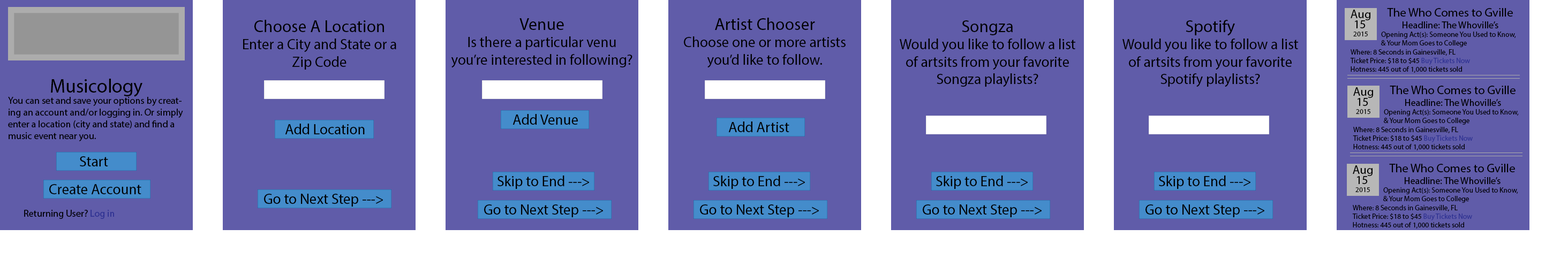
<style>
.page{position:relative;width:1568px;height:259px;background:#605ca9}
.page>*{position:absolute;margin:0}
.t1{font:14.5px "MyriadPro-Regular";color:#000000}
.t2{font:17px "MyriadPro-Regular";color:#000000}
.t3{font:12.1px "MyriadPro-Regular";color:#000000}
.t4{font:7.3px "MyriadPro-Regular";color:#000000}
.t5{font:9.7px "MyriadPro-Regular";color:#000000}
.t6{font:7.3px "MyriadPro-Regular";color:#2e3192}
.t7{font:19.4px "MyriadPro-Regular";color:#000000}
.t8{font:9.7px "MyriadPro-Regular";color:#2e3192}
</style>
<div class="page">
<p class="t1" style="left:684px;top:18px;width:162px;height:50px;text-align:center"><span class="t2">Artist Chooser<br></span>Choose one or more artists you’d like to follow.</p>
<p class="t3" style="left:1351px;top:10px;width:19px;height:10px">Aug</p>
<p class="t4" style="left:1381px;top:8px;width:135px;height:39px;text-align:center"><span class="t3">The Who Comes to Gville<br></span><span class="t5">Headline: The Whoville’s<br></span>Opening Act(s): Someone You Used to Know, &amp; Your Mom Goes to College</p>
<p class="t1" style="left:243px;top:20px;width:153px;height:50px;text-align:center"><span class="t2">Choose A Location<br></span>Enter a City and State or a Zip Code</p>
<p class="t1" style="left:451px;top:18px;width:181px;height:50px;text-align:center"><span class="t2">Venue<br></span>Is there a particular venu you’re interested in following?</p>
<p class="t1" style="left:900px;top:20px;width:175px;height:67px;text-align:center"><span class="t2">Songza<br></span>Would you like to follow a list of artsits from your favorite Songza playlists?</p>
<p class="t1" style="left:1122px;top:20px;width:176px;height:67px;text-align:center"><span class="t2">Spotify<br></span>Would you like to follow a list of artsits from your favorite Spotify playlists?</p>
<p class="t3" style="left:1355px;top:20px;width:11px;height:8px">15</p>
<p class="t4" style="left:1353px;top:32px;width:15px;height:4px">2015</p>
<p class="t4" style="left:1350px;top:49px;width:120px;height:24px">Where: 8 Seconds in Gainesville, FL<br>Ticket Price: $18 to $45 <span class="t6">Buy Tickets Now<br></span>Hotness: 445 out of 1,000 tickets sold</p>
<p class="t5" style="left:8px;top:79px;width:175px;height:62px;text-align:center"><span class="t7">Musicology<br></span>You can set and save your options by creating an account and/or logging in. Or simply enter a location (city and state) and find a music event near you.</p>
<p class="t3" style="left:1353px;top:87px;width:20px;height:11px">Aug</p>
<p class="t4" style="left:1384px;top:86px;width:135px;height:39px;text-align:center"><span class="t3">The Who Comes to Gville<br></span><span class="t5">Headline: The Whoville’s<br></span>Opening Act(s): Someone You Used to Know, &amp; Your Mom Goes to College</p>
<p class="t3" style="left:1358px;top:98px;width:10px;height:8px">15</p>
<p class="t4" style="left:1356px;top:109px;width:14px;height:5px">2015</p>
<p class="t1" style="left:285px;top:124px;width:80px;height:10px">Add Location</p>
<p class="t1" style="left:512px;top:114px;width:66px;height:11px">Add Venue</p>
<p class="t1" style="left:728px;top:122px;width:61px;height:10px">Add Artist</p>
<p class="t4" style="left:1353px;top:127px;width:120px;height:23px">Where: 8 Seconds in Gainesville, FL<br>Ticket Price: $18 to $45 <span class="t6">Buy Tickets Now<br></span>Hotness: 445 out of 1,000 tickets sold</p>
<p class="t1" style="left:80px;top:156px;width:28px;height:11px">Start</p>
<p class="t3" style="left:1353px;top:165px;width:20px;height:11px">Aug</p>
<p class="t4" style="left:1383px;top:164px;width:135px;height:39px;text-align:center"><span class="t3">The Who Comes to Gville<br></span><span class="t5">Headline: The Whoville’s<br></span>Opening Act(s): Someone You Used to Know, &amp; Your Mom Goes to College</p>
<p class="t1" style="left:49px;top:184px;width:92px;height:10px">Create Account</p>
<p class="t1" style="left:497px;top:176px;width:92px;height:13px">Skip to End ---&gt;</p>
<p class="t1" style="left:713px;top:176px;width:92px;height:13px">Skip to End ---&gt;</p>
<p class="t1" style="left:936px;top:176px;width:92px;height:13px">Skip to End ---&gt;</p>
<p class="t1" style="left:1159px;top:176px;width:91px;height:13px">Skip to End ---&gt;</p>
<p class="t3" style="left:1357px;top:176px;width:11px;height:8px">15</p>
<p class="t1" style="left:264px;top:194px;width:119px;height:13px">Go to Next Step ---&gt;</p>
<p class="t4" style="left:1355px;top:187px;width:15px;height:5px">2015</p>
<p class="t5" style="left:24px;top:210px;width:90px;height:9px">Returning User? <span class="t8">Log in</span></p>
<p class="t1" style="left:484px;top:205px;width:119px;height:12px">Go to Next Step ---&gt;</p>
<p class="t1" style="left:700px;top:205px;width:119px;height:12px">Go to Next Step ---&gt;</p>
<p class="t1" style="left:923px;top:205px;width:119px;height:12px">Go to Next Step ---&gt;</p>
<p class="t1" style="left:1145px;top:205px;width:119px;height:12px">Go to Next Step ---&gt;</p>
<p class="t4" style="left:1352px;top:205px;width:120px;height:24px">Where: 8 Seconds in Gainesville, FL<br>Ticket Price: $18 to $45 <span class="t6">Buy Tickets Now<br></span>Hotness: 445 out of 1,000 tickets sold</p>
</div>
